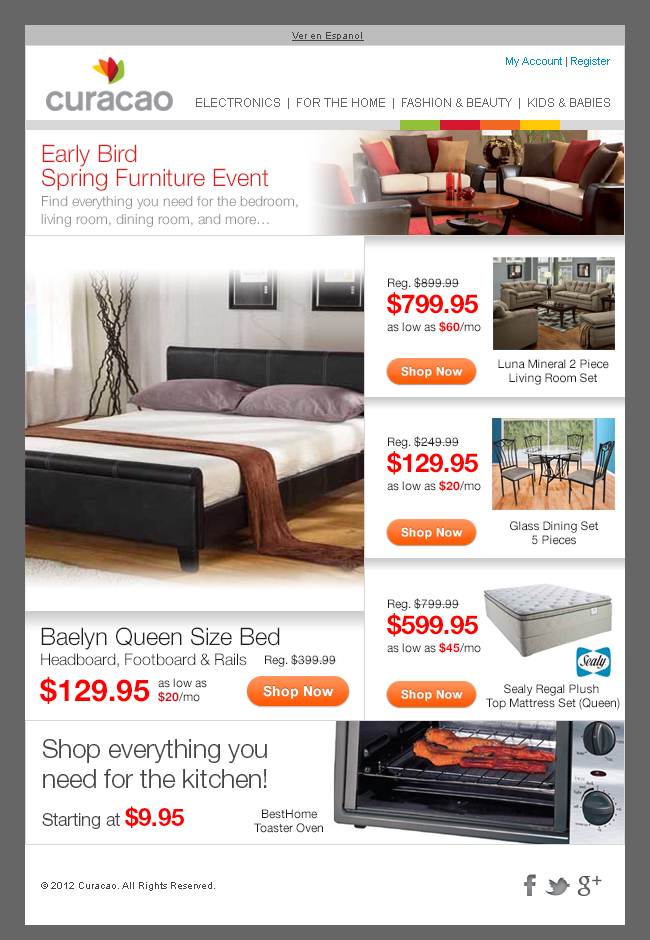
<style>
.page{position:relative;width:650px;height:940px;background:#ffffff}
.page>*{position:absolute;margin:0}
.t1{font:10px "ArialMT";color:#444444;text-decoration:underline}
.t2{font:11px "ArialMT";color:#008ecf}
.t3{font:11px "ArialMT";color:#666666}
.t4{font:12px "ArialMT";color:#666666}
.t5{font:14px/20px "HelveticaNeue-Light";color:#878a8e}
.t6{font:24px/24px "HelveticaNeue-Light";color:#e11d1d}
.t7{font:14px/18px "HelveticaNeue-Light";color:#878a8e}
.t8{font:12px/18px "HelveticaNeue-Roman";color:#1e1e1e}
.t9{font:26px/26px "HelveticaNeue-Bold";color:#ff0000}
.t10{font:12px/18px "HelveticaNeue-Bold";color:#ff0000}
.t11{font:12px/14px "HelveticaNeue-Roman";color:#1e1e1e}
.t12{font:16px/20px "HelveticaNeue-Light";color:#1e1e1e}
.t13{font:24px/18px "HelveticaNeue-Light";color:#1e1e1e}
.t14{font:30px/36px "HelveticaNeue-Bold";color:#ff0000}
.t15{font:12px "HelveticaNeue-Roman";color:#1e1e1e}
.t16{font:12px/14px "HelveticaNeue-Roman";color:#ce181e}
.t17{font:12px/14px "HelveticaNeue-Bold";color:#ce181e}
.t18{font:26px/30px "HelveticaNeue-Light";color:#444444}
.t19{font:18px/24px "HelveticaNeue-Light";color:#444444}
.t20{font:24px/24px "HelveticaNeue-Bold";color:#ff0000}
.t21{font:10px "ArialMT";color:#444444}
</style>
<div class="page">
<p class="t1" style="left:292px;top:32px;width:72px;height:9px">Ver en Espanol</p>
<p class="t2" style="left:506px;top:57px;width:104px;height:10px">My Account<span class="t3"> | </span>Register</p>
<p class="t4" style="left:196px;top:98px;width:414px;height:11px">ELECTRONICS  |  FOR THE HOME  |  FASHION &amp; BEAUTY  |  KIDS &amp; BABIES</p>
<p class="t5" style="left:41px;top:144px;width:257px;height:83px"><span class="t6">Early Bird <br>Spring Furniture Event<br></span>Find everything you need for the bedroom, <span class="t7">living room, dining room, and more…</span></p>
<p class="t8" style="left:387px;top:277px;width:94px;height:56px">Reg. $899.99<br><span class="t9">$799.95<br></span>as low as <span class="t10">$60</span>/mo</p>
<p class="t11" style="left:498px;top:359px;width:111px;height:26px;text-align:center">Luna Mineral 2 Piece<br>Living Room Set</p>
<p class="t8" style="left:387px;top:436px;width:94px;height:56px">Reg. $249.99<br><span class="t9">$129.95<br></span>as low as <span class="t10">$20</span>/mo</p>
<p class="t11" style="left:510px;top:521px;width:88px;height:24px;text-align:center">Glass Dining Set<br>5 Pieces</p>
<p class="t8" style="left:387px;top:598px;width:94px;height:56px">Reg. $799.99<br><span class="t9">$599.95<br></span>as low as <span class="t10">$45</span>/mo</p>
<p class="t12" style="left:40px;top:627px;width:240px;height:77px"><span class="t13">Baelyn Queen Size Bed<br></span>Headboard, Footboard &amp; Rails<br><span class="t14">$129.95</span></p>
<p class="t15" style="left:265px;top:654px;width:72px;height:13px">Reg. $399.99</p>
<p class="t16" style="left:158px;top:678px;width:49px;height:25px">as low as<br><span class="t17">$20</span>/mo</p>
<p class="t11" style="left:486px;top:684px;width:134px;height:26px;text-align:center">Sealy Regal Plush <br>Top Mattress Set (Queen)</p>
<p class="t18" style="left:42px;top:739px;width:225px;height:90px">Shop everything you need for the kitchen! <br><br><span class="t19">Starting at </span><span class="t20">$9.95</span></p>
<p class="t11" style="left:254px;top:809px;width:69px;height:24px;text-align:center">BestHome<br>Toaster Oven</p>
<p class="t21" style="left:41px;top:882px;width:174px;height:9px">© 2012 Curacao. All Rights Reserved.</p>
</div>
